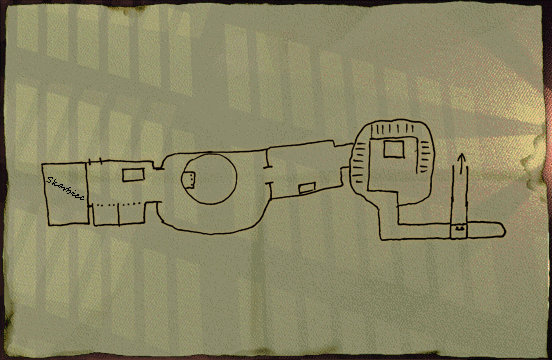
<style>
.page{position:relative;width:552px;height:360px;background:#8c8c6c}
.page>*{position:absolute;margin:0}
.t1{font:9px "SegoeScript";color:#000000}
</style>
<div class="page">
<p class="t1" style="left:46px;top:177px;width:38px;height:23px;rotate:29deg">Skarbiec</p>
</div>
